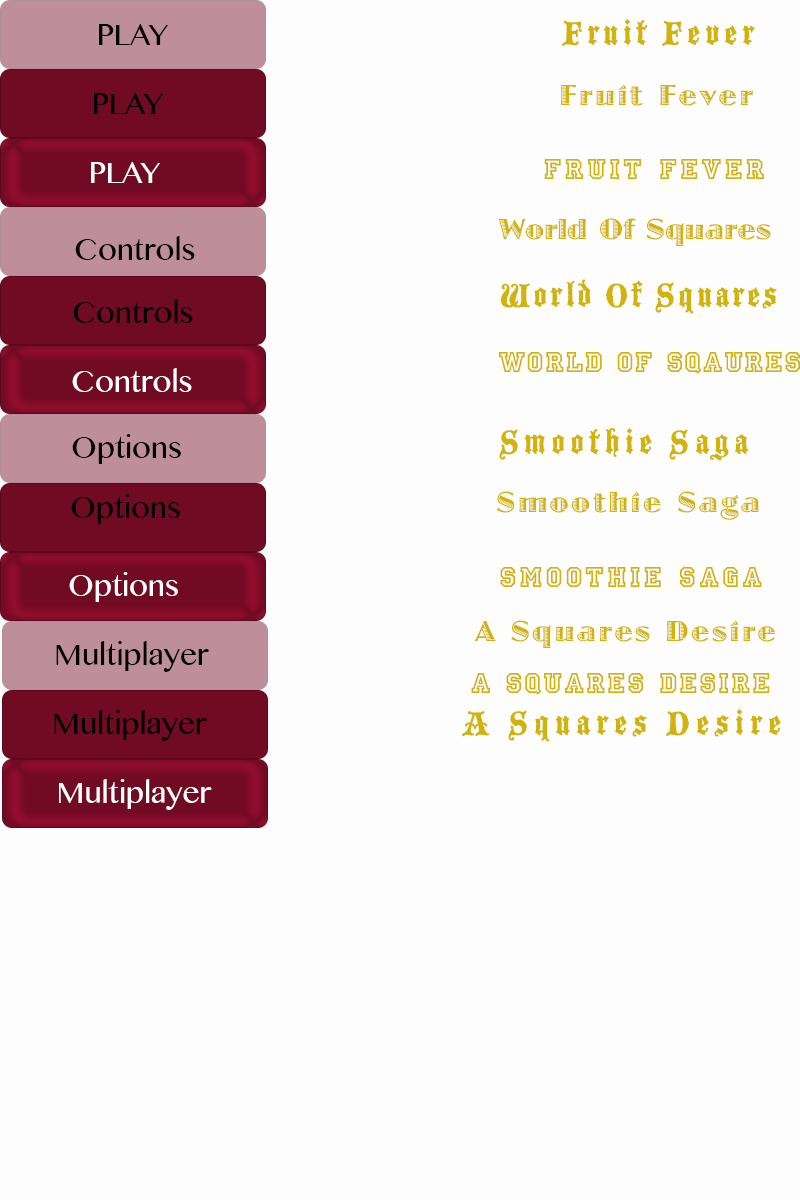
<style>
.page{position:relative;width:800px;height:1200px;background:#fefdfd}
.page>*{position:absolute;margin:0}
.t1{font:30px "OriyaMN";color:#000301}
.t2{font:36px "BlackmoorLetPlain";letter-spacing:0.12em;color:#d1b30a}
.t3{font:30px "JazzLetPlain";letter-spacing:0.08em;color:#d1b30a}
.t4{font:30px "PrincetownLET";letter-spacing:0.12em;color:#d1b30a}
.t5{font:30px "OriyaMN";color:#ffffff}
.t6{font:30px "JazzLetPlain";color:#d1b30a}
.t7{font:36px "BlackmoorLetPlain";letter-spacing:0.08em;color:#d1b30a}
.t8{font:30px "PrincetownLET";letter-spacing:0.06em;color:#d1b30a}
.t9{font:36px "BlackmoorLetPlain";letter-spacing:0.14em;color:#d1b30a}
.t10{font:30px "PrincetownLET";letter-spacing:0.08em;color:#d1b30a}
.t11{font:36px "BlackmoorLetPlain";letter-spacing:0.16em;color:#d1b30a}
</style>
<div class="page">
<p class="t1" style="left:99px;top:24px;width:69px;height:21px">PLAY</p>
<p class="t2" style="left:562px;top:19px;width:193px;height:27px">Fruit Fever</p>
<p class="t3" style="left:560px;top:84px;width:193px;height:22px">Fruit Fever</p>
<p class="t1" style="left:94px;top:93px;width:69px;height:21px">PLAY</p>
<p class="t4" style="left:544px;top:159px;width:220px;height:20px">Fruit Fever</p>
<p class="t5" style="left:91px;top:162px;width:69px;height:21px">PLAY</p>
<p class="t6" style="left:498px;top:218px;width:273px;height:28px">World Of Squares</p>
<p class="t1" style="left:75px;top:236px;width:120px;height:24px">Controls</p>
<p class="t7" style="left:500px;top:279px;width:277px;height:35px">World Of Squares</p>
<p class="t1" style="left:73px;top:299px;width:120px;height:24px">Controls</p>
<p class="t8" style="left:499px;top:352px;width:301px;height:22px">World Of Sqaures</p>
<p class="t5" style="left:72px;top:368px;width:120px;height:24px">Controls</p>
<p class="t1" style="left:72px;top:434px;width:109px;height:30px">Options</p>
<p class="t9" style="left:499px;top:428px;width:250px;height:33px">Smoothie Saga</p>
<p class="t1" style="left:71px;top:494px;width:109px;height:30px">Options</p>
<p class="t3" style="left:497px;top:491px;width:262px;height:29px">Smoothie Saga</p>
<p class="t4" style="left:500px;top:567px;width:262px;height:20px">Smoothie Saga</p>
<p class="t5" style="left:69px;top:572px;width:109px;height:30px">Options</p>
<p class="t3" style="left:474px;top:620px;width:301px;height:28px">A Squares Desire</p>
<p class="t1" style="left:56px;top:641px;width:153px;height:31px">Multiplayer</p>
<p class="t10" style="left:471px;top:673px;width:299px;height:22px">A Squares Desire</p>
<p class="t1" style="left:54px;top:710px;width:153px;height:31px">Multiplayer</p>
<p class="t11" style="left:462px;top:709px;width:319px;height:33px">A Squares Desire</p>
<p class="t5" style="left:59px;top:779px;width:153px;height:31px">Multiplayer</p>
</div>
